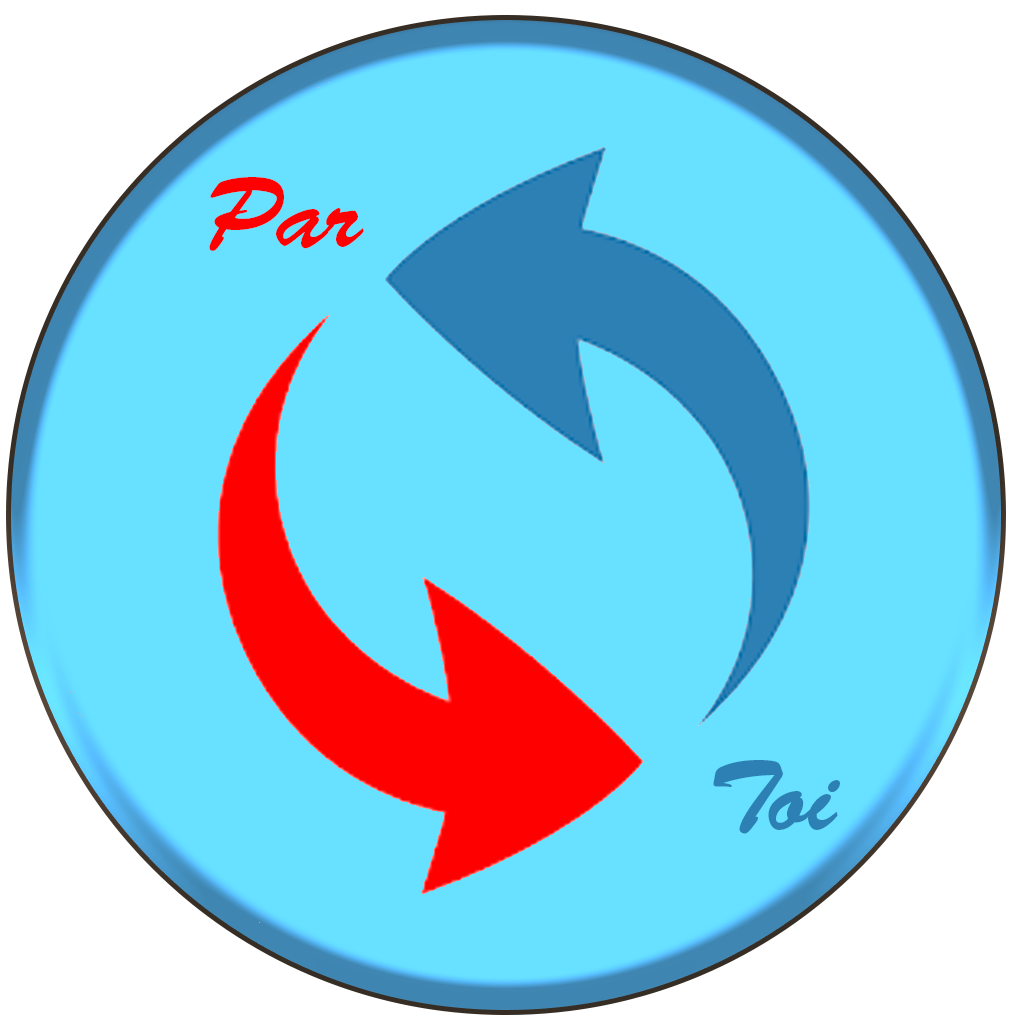
<style>
.page{position:relative;width:1024px;height:1024px;background:#67e1ff}
.page>*{position:absolute;margin:0}
.t1{font:100px "BrushScriptStd";color:#ff0000}
.t2{font:100px "BrushScriptStd";color:#2c80b4}
</style>
<div class="page">
<p class="t1" style="left:209px;top:177px;width:155px;height:74px">Par</p>
<p class="t2" style="left:713px;top:760px;width:127px;height:74px">Toi</p>
</div>
